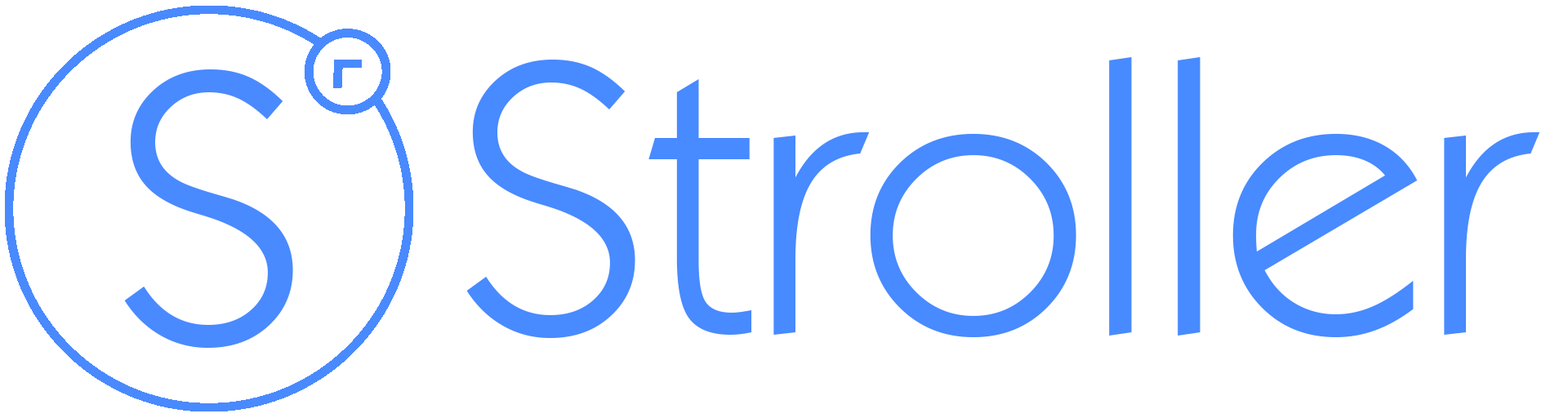
<style>
.page{position:relative;width:1568px;height:418px;background:#ffffff}
.page>*{position:absolute;margin:0}
.t1{font:389.9px "KabelITCbyBT-Book";color:#488aff}
</style>
<div class="page">
<p class="t1" style="left:466px;top:57px;width:1074px;height:281px">Stroller</p>
</div>
